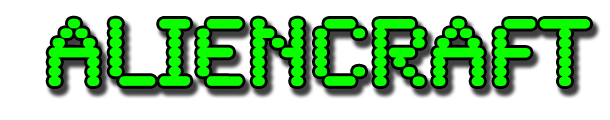
<style>
.page{position:relative;width:610px;height:120px;background:#ffffff}
.page>*{position:absolute;margin:0}
.t1{font:100px "SynchroLET";color:#0cff00}
</style>
<div class="page">
<p class="t1" style="left:48px;top:18px;width:542px;height:68px">ALIENCRAFT</p>
</div>
